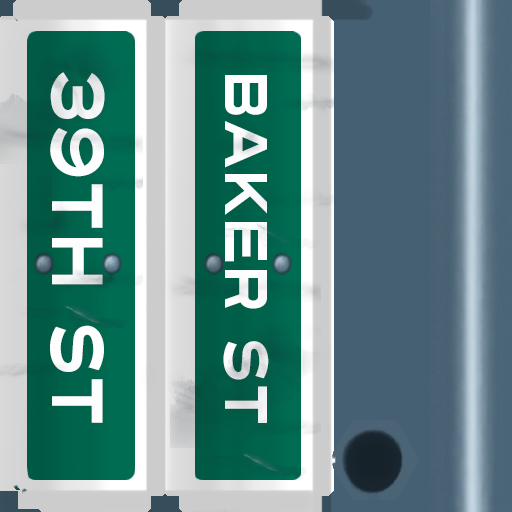
<style>
.page{position:relative;width:512px;height:512px}
.page>*{position:absolute;margin:0}
.t1{font:72px "Turnpike";color:#fefeff;scale:0.75 1}
.t2{font:60px "Turnpike";color:#fefeff;scale:0.75 1}
</style>
<div class="page">
<p class="t1" style="left:50px;top:72px;width:55px;height:351px;rotate:90deg">39th st</p>
<p class="t2" style="left:223px;top:75px;width:46px;height:348px;rotate:90deg">Baker St</p>
</div>
